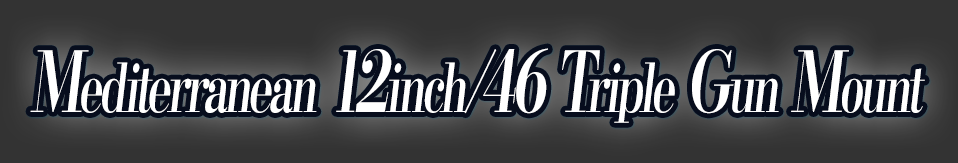
<style>
.page{position:relative;width:958px;height:163px;background:#333333}
.page>*{position:absolute;margin:0}
.t1{font:67.2px "KochoStd-Heavy";letter-spacing:-0.08em;color:#ffffff;font-style:italic;scale:0.67 1}
.t2{font:84px "KochoStd-Heavy";letter-spacing:-0.08em;color:#ffffff;font-style:italic;scale:0.67 1}
</style>
<div class="page">
<p class="t1" style="left:30px;top:48px;width:895px;height:75px"><span class="t2">M</span>editerranean<span class="t2"> 12</span>inch<span class="t2">/46 T</span>riple<span class="t2"> G</span>un<span class="t2"> M</span>ount</p>
</div>
